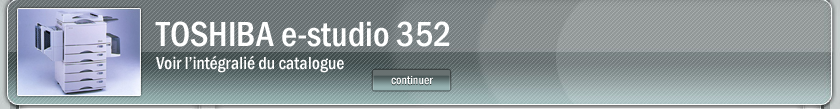
<style>
.page{position:relative;width:840px;height:109px}
.page>*{position:absolute;margin:0}
.t1{font:36px "FranklinGothic-MediumCond";color:#ffffff}
.t2{font:18px "FranklinGothic-MediumCond";color:#ffffff}
</style>
<div class="page">
<p class="t1" style="left:155px;top:21px;width:295px;height:26px">TOSHIBA e-studio 352</p>
<p class="t2" style="left:156px;top:55px;width:188px;height:18px">Voir l’intégralié du catalogue</p>
</div>
